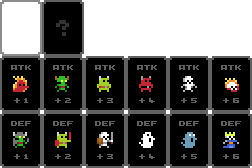
<style>
.page{position:relative;width:252px;height:168px;background:#000000}
.page>*{position:absolute;margin:0}
.t1{font:30px "5×5";color:#323232;font-weight:bold}
.t2{font:10px "5×5";color:#616161;font-weight:bold}
</style>
<div class="page">
<p class="t1" style="left:56px;top:20px;width:13px;height:16px">?</p>
<p class="t2" style="left:11px;top:65px;width:20px;height:5px">ATK</p>
<p class="t2" style="left:53px;top:65px;width:20px;height:5px">ATK</p>
<p class="t2" style="left:95px;top:65px;width:20px;height:5px">ATK</p>
<p class="t2" style="left:137px;top:65px;width:20px;height:5px">ATK</p>
<p class="t2" style="left:179px;top:65px;width:20px;height:5px">ATK</p>
<p class="t2" style="left:221px;top:65px;width:20px;height:5px">ATK</p>
<p class="t2" style="left:14px;top:98px;width:14px;height:5px">+ 1</p>
<p class="t2" style="left:55px;top:98px;width:16px;height:5px">+ 2</p>
<p class="t2" style="left:97px;top:98px;width:16px;height:5px">+ 3</p>
<p class="t2" style="left:139px;top:98px;width:16px;height:5px">+ 4</p>
<p class="t2" style="left:181px;top:98px;width:16px;height:5px">+ 5</p>
<p class="t2" style="left:223px;top:98px;width:16px;height:5px">+ 6</p>
<p class="t2" style="left:11px;top:121px;width:20px;height:5px">Def</p>
<p class="t2" style="left:53px;top:121px;width:20px;height:5px">DEF</p>
<p class="t2" style="left:95px;top:121px;width:20px;height:5px">DEF</p>
<p class="t2" style="left:137px;top:121px;width:20px;height:5px">DEF</p>
<p class="t2" style="left:179px;top:121px;width:20px;height:5px">DEF</p>
<p class="t2" style="left:221px;top:121px;width:20px;height:5px">DEF</p>
<p class="t2" style="left:14px;top:154px;width:14px;height:5px">+ 1</p>
<p class="t2" style="left:55px;top:154px;width:16px;height:5px">+ 2</p>
<p class="t2" style="left:97px;top:154px;width:16px;height:5px">+ 3</p>
<p class="t2" style="left:139px;top:154px;width:16px;height:5px">+ 4</p>
<p class="t2" style="left:181px;top:154px;width:16px;height:5px">+ 5</p>
<p class="t2" style="left:223px;top:154px;width:16px;height:5px">+ 6</p>
</div>
